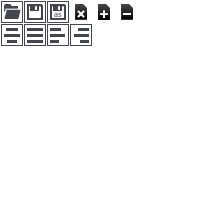
<style>
.page{position:relative;width:200px;height:200px;background:#ffffff}
.page>*{position:absolute;margin:0}
.t1{font:8px "TrebuchetMS"}
</style>
<div class="page">
<p class="t1" style="left:54px;top:12px;width:8px;height:5px">as</p>
</div>
